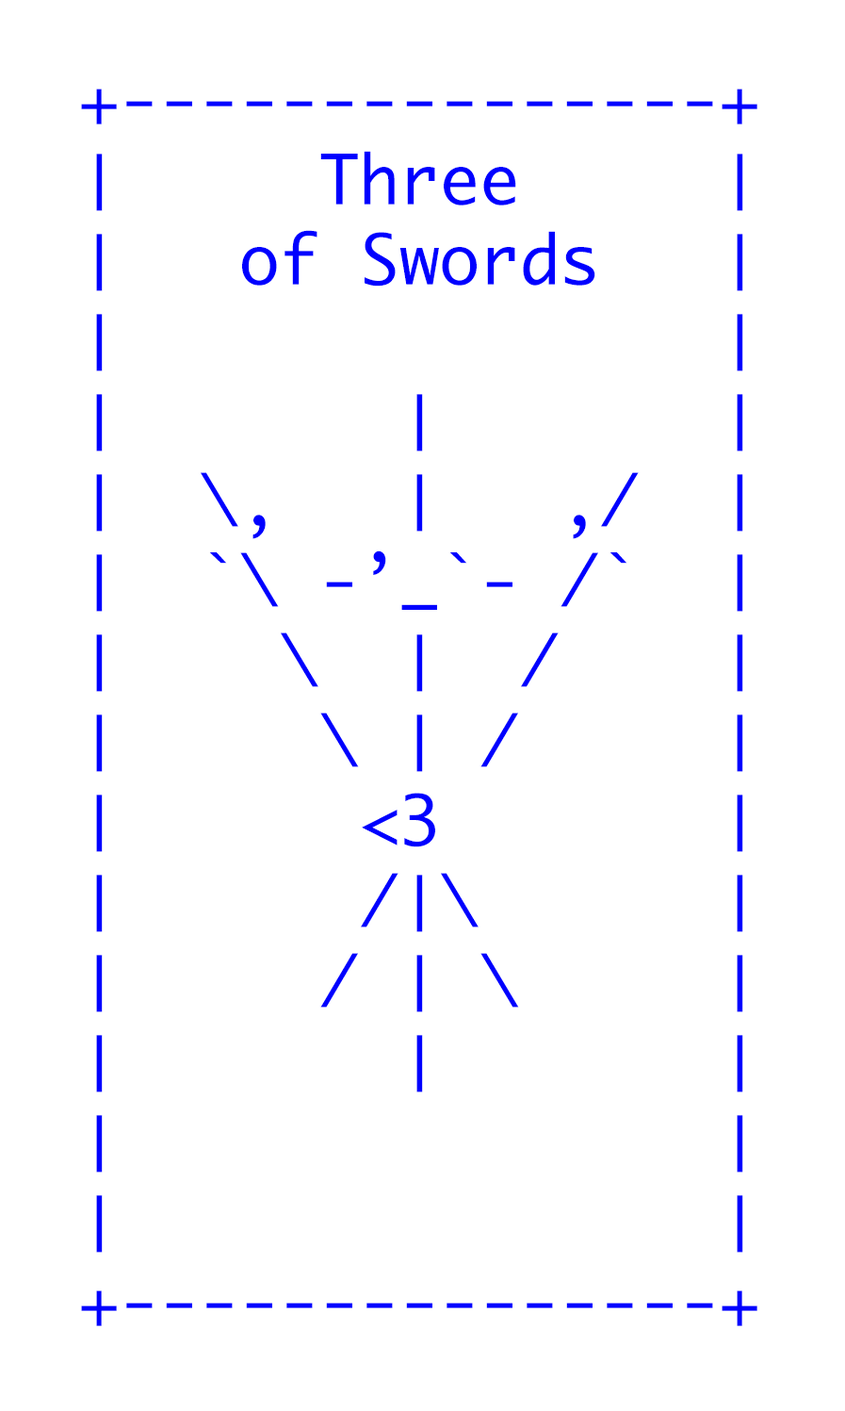
<style>
.page{position:relative;width:845px;height:1411px;background:#ffffff}
.page>*{position:absolute;margin:0}
.t1{font:66.7px "Monaco";color:#0000ff}
</style>
<div class="page">
<p class="t1" style="left:81px;top:89px;width:677px;height:1237px">+---------------+<br>│     Three     │<br>│   of Swords   │<br>│               │<br>│       │       │<br>│  \,   │   ,/  │<br>│  `\ -’_`- /`  │<br>│    \  │  /    │ <br>│     \ │ /     │ <br>│      &lt;3       │<br>│      /│\      │ <br>│     / │ \     │ <br>│       │       │<br>│               │<br>│               │<br>+---------------+</p>
</div>
